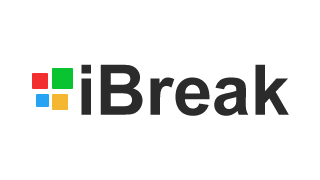
<style>
.page{position:relative;width:320px;height:180px;background:#ffffff}
.page>*{position:absolute;margin:0}
.t1{font:69.6px "Arial-BoldMT";color:#2b2b2b}
</style>
<div class="page">
<p class="t1" style="left:81px;top:64px;width:208px;height:52px">iBreak</p>
</div>
